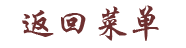
<style>
.page{position:relative;width:186px;height:48px;background:#ffffff}
.page>*{position:absolute;margin:0}
.t1{font:36px "STXingkai";color:#6e3030}
</style>
<div class="page">
<p class="t1" style="left:22px;top:5px;width:137px;height:36px">返回菜单</p>
</div>
